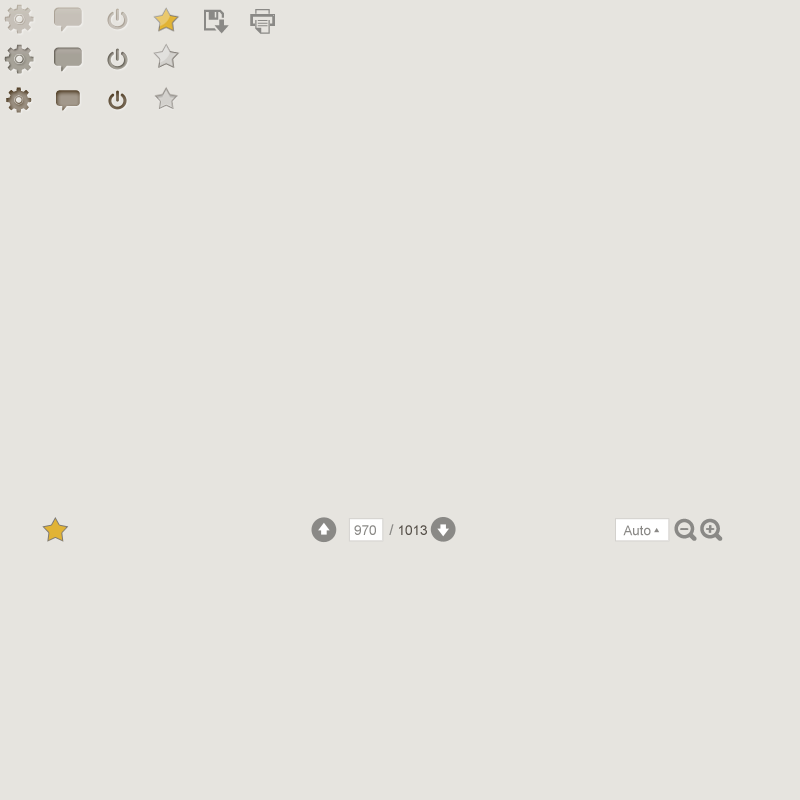
<style>
.page{position:relative;width:800px;height:800px;background:#e6e4df}
.page>*{position:absolute;margin:0}
.t1{font:13.4px "ArialMT";color:#8a8986}
.t2{font:15.1px "ArialMT";color:#8a8986}
.t3{font:13.4px "ArialMT";color:#57514a}
.t4{font:13.4px "ErasITC-Bold";color:#8a8986}
</style>
<div class="page">
<p class="t1" style="left:354px;top:525px;width:22px;height:10px">970</p>
<p class="t2" style="left:389px;top:524px;width:5px;height:11px">/</p>
<p class="t3" style="left:399px;top:525px;width:28px;height:10px">1013</p>
<p class="t1" style="left:623px;top:525px;width:28px;height:11px">Auto</p>
<p class="t4" style="left:680px;top:528px;width:8px;height:2px">--</p>
<p class="t4" style="left:681px;top:528px;width:8px;height:2px">--</p>
<p class="t4" style="left:706px;top:525px;width:9px;height:8px">+</p>
<p class="t4" style="left:706px;top:525px;width:8px;height:8px">+</p>
</div>
